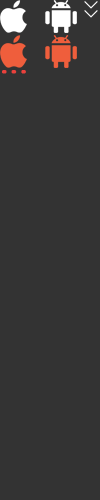
<style>
.page{position:relative;width:100px;height:500px;background:#333333}
.page>*{position:absolute;margin:0}
.t1{font:18px "LiSu";color:#ffffff;font-weight:bold}
.t2{font:40px "MicrosoftYaHeiLight";color:#eb413c;font-weight:bold}
</style>
<div class="page">
<p class="t1" style="left:84px;top:1px;width:14px;height:17px;rotate:90deg">&gt;&gt;</p>
<p class="t2" style="left:2px;top:70px;width:24px;height:4px">…</p>
</div>
